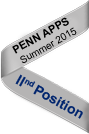
<style>
.page{position:relative;width:89px;height:134px;background:#ffffff}
.page>*{position:absolute;margin:0}
.t1{font:10px "ArialMT";color:#000000}
.t2{font:11px "Arial-BoldMT";color:#000000}
.t3{font:14px "Arial-BoldMT";color:#01256e}
</style>
<div class="page">
<p class="t1" style="left:12px;top:17px;width:65px;height:46px;text-align:center;rotate:-29deg"><span class="t2">PENN APPS <br></span>Summer 2015</p>
<p class="t3" style="left:15px;top:74px;width:68px;height:45px;rotate:29deg">IInd Position</p>
</div>
